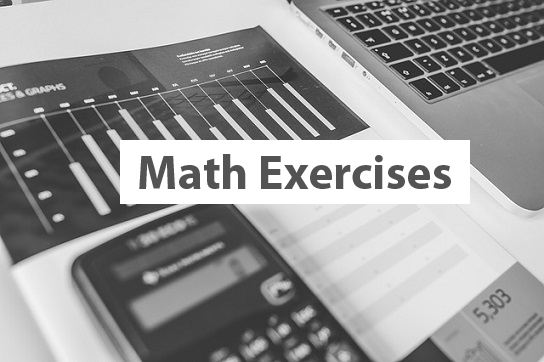
<style>
.page{position:relative;width:544px;height:362px}
.page>*{position:absolute;margin:0}
.t1{font:48px "MyriadPro-Bold";color:#535353}
</style>
<div class="page">
<p class="t1" style="left:139px;top:154px;width:312px;height:35px">Math Exercises</p>
</div>
